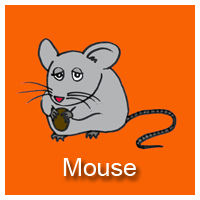
<style>
.page{position:relative;width:200px;height:200px;background:#f86204}
.page>*{position:absolute;margin:0}
.t1{font:25px "ArialMT";color:#ffffff}
</style>
<div class="page">
<p class="t1" style="left:63px;top:158px;width:73px;height:18px">Mouse</p>
</div>
